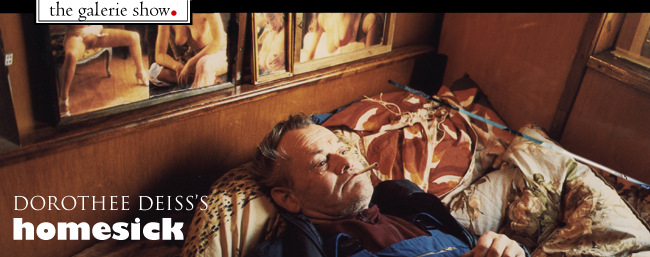
<style>
.page{position:relative;width:650px;height:257px}
.page>*{position:absolute;margin:0}
.t1{font:18.8px "TrajanPro-Regular";color:#ffffff}
.t2{font:29.2px "GillSans-UltraBold";color:#ffffff}
</style>
<div class="page">
<p class="t1" style="left:13px;top:194px;width:195px;height:17px">DOROTHEE DEISS’S</p>
<p class="t2" style="left:13px;top:217px;width:171px;height:23px">homesick</p>
</div>
